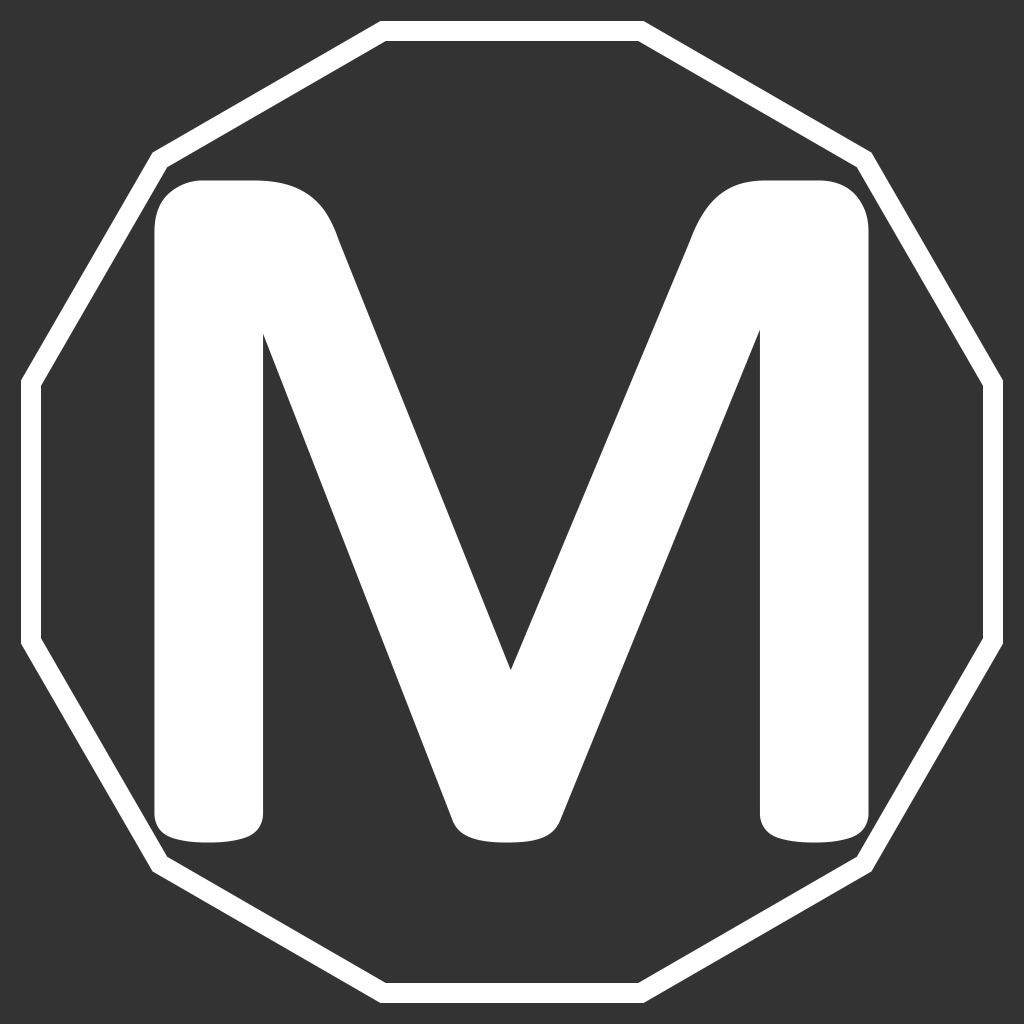
<style>
.page{position:relative;width:1024px;height:1024px;background:#333333}
.page>*{position:absolute;margin:0}
.t1{font:1000px "Calibri";color:#fefefe;font-weight:bold}
</style>
<div class="page">
<p class="t1" style="left:154px;top:180px;width:715px;height:663px">M</p>
</div>
